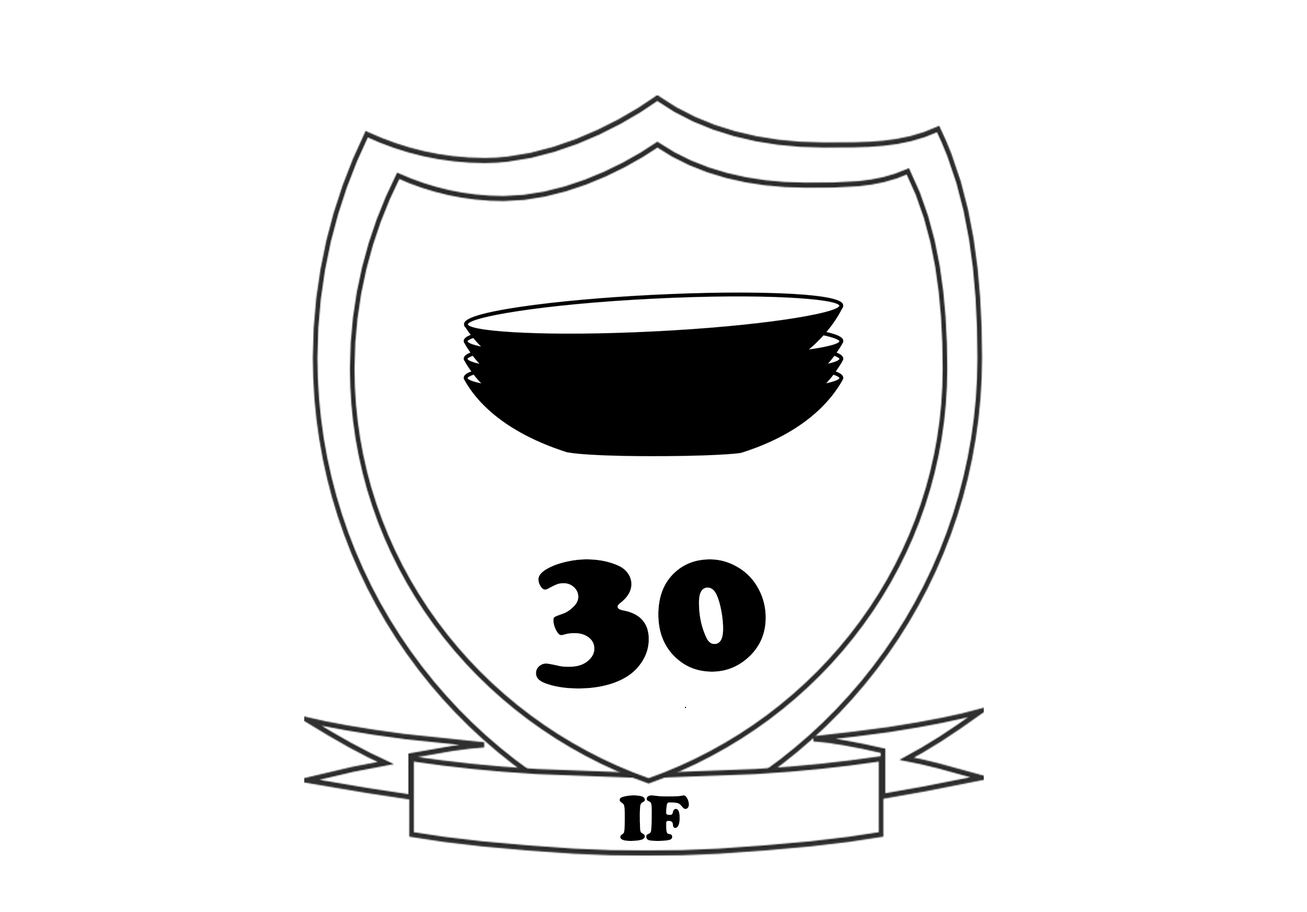
<style>
.page{position:relative;width:1307px;height:912px;background:#ffffff}
.page>*{position:absolute;margin:0}
.t1{font:195.3px "CooperBlack";color:#000000}
.t2{font:65.1px "CooperBlack";color:#000000}
</style>
<div class="page">
<p class="t1" style="left:536px;top:559px;width:230px;height:129px">30</p>
<p class="t2" style="left:620px;top:795px;width:70px;height:46px">IF</p>
</div>
